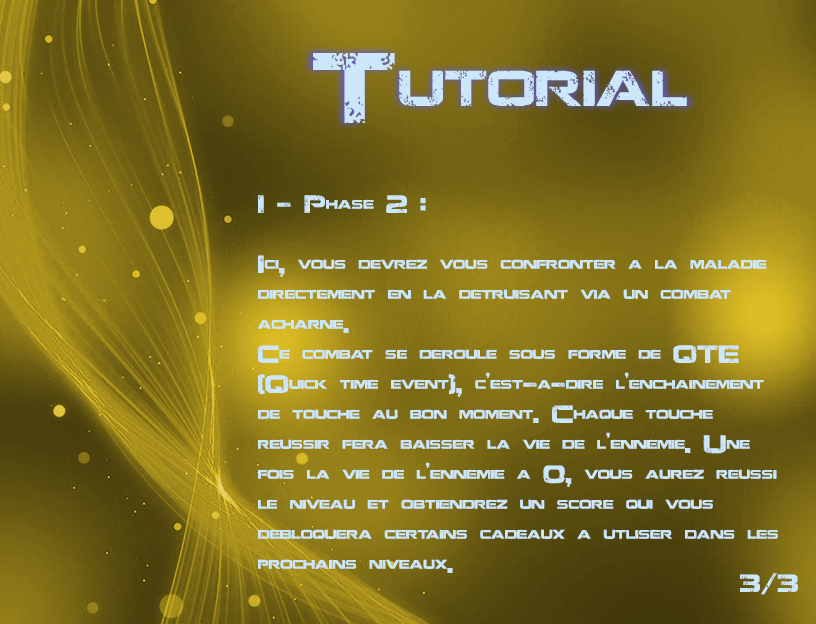
<style>
.page{position:relative;width:816px;height:624px}
.page>*{position:absolute;margin:0}
.t1{font:100px "JacintoSans";color:#cce6fa}
.t2{font:25px "JacintoSans";color:#cce6fa}
</style>
<div class="page">
<p class="t1" style="left:313px;top:53px;width:374px;height:70px">Tutorial</p>
<p class="t2" style="left:257px;top:195px;width:521px;height:378px">1 - Phase 2 :<br><br>Ici, vous devrez vous confronter a la maladie directement en la detruisant via un combat acharne. <br>Ce combat se deroule sous forme de QTE (Quick time event), c’est-a-dire l’enchainement de touche au bon moment. Chaque touche reussir fera baisser la vie de l’ennemie. Une fois la vie de l’ennemie a 0, vous aurez reussi le niveau et obtiendrez un score qui vous debloquera certains cadeaux a utliser dans les prochains niveaux.</p>
<p class="t2" style="left:740px;top:573px;width:58px;height:22px">3/3</p>
</div>
